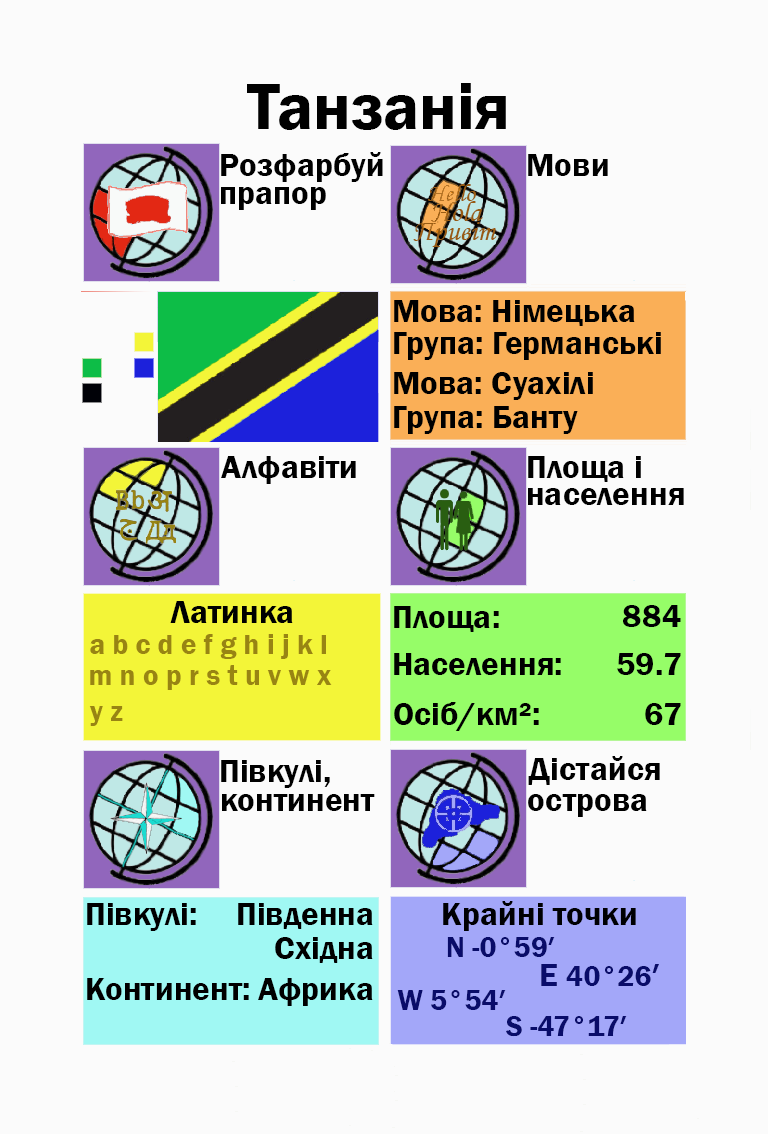
<style>
.page{position:relative;width:768px;height:1134px;background:#fbfbfb}
.page>*{position:absolute;margin:0}
.t1{font:66.7px "FranklinGothic-Demi";color:#000000}
.t2{font:33.3px "FranklinGothic-Demi";color:#000000}
.t3{font:33.3px "FranklinGothic-Demi";color:#000003}
.t4{font:29.2px "FranklinGothic-Demi";color:#988413}
.t5{font:29.2px "FranklinGothic-Demi";color:#090c69}
.t6{font:33.3px "FranklinGothic-Demi";color:#090c69}
</style>
<div class="page">
<p class="t1" style="left:247px;top:83px;width:259px;height:47px">Танзанія</p>
<p class="t2" style="left:221px;top:152px;width:162px;height:30px">Розфарбуй</p>
<p class="t2" style="left:528px;top:154px;width:80px;height:22px">Мови</p>
<p class="t2" style="left:221px;top:187px;width:105px;height:23px">прапор</p>
<p class="t2" style="left:394px;top:300px;width:241px;height:26px">Мова: Німецька</p>
<p class="t2" style="left:394px;top:332px;width:267px;height:28px">Група: Германські</p>
<p class="t2" style="left:394px;top:372px;width:199px;height:28px">Мова: Суахілі</p>
<p class="t2" style="left:394px;top:406px;width:184px;height:28px">Група: Банту</p>
<p class="t2" style="left:221px;top:456px;width:135px;height:28px">Алфавіти</p>
<p class="t2" style="left:528px;top:456px;width:113px;height:26px">Площа і</p>
<p class="t2" style="left:528px;top:488px;width:156px;height:17px">населення</p>
<p class="t2" style="left:170px;top:601px;width:123px;height:22px">Латинка</p>
<p class="t2" style="left:394px;top:606px;width:105px;height:26px">Площа:</p>
<p class="t3" style="left:623px;top:605px;width:58px;height:22px">884</p>
<p class="t4" style="left:90px;top:634px;width:236px;height:25px">a b c d e f g h i j k l</p>
<p class="t2" style="left:394px;top:653px;width:167px;height:22px">Населення:</p>
<p class="t2" style="left:617px;top:653px;width:64px;height:22px">59.7</p>
<p class="t4" style="left:90px;top:665px;width:242px;height:25px">m n o p r s t u v w x</p>
<p class="t2" style="left:394px;top:702px;width:145px;height:29px">Осіб/км²:</p>
<p class="t4" style="left:89px;top:706px;width:34px;height:20px">y z</p>
<p class="t2" style="left:645px;top:703px;width:36px;height:22px">67</p>
<p class="t2" style="left:221px;top:760px;width:109px;height:28px">Півкулі,</p>
<p class="t2" style="left:528px;top:756px;width:132px;height:29px">Дістайся</p>
<p class="t2" style="left:222px;top:794px;width:153px;height:17px">континент</p>
<p class="t2" style="left:528px;top:794px;width:119px;height:23px">острова</p>
<p class="t2" style="left:87px;top:903px;width:109px;height:28px">Півкулі:</p>
<p class="t2" style="left:238px;top:903px;width:135px;height:26px">Південна</p>
<p class="t3" style="left:443px;top:901px;width:193px;height:30px">Крайні точки</p>
<p class="t2" style="left:275px;top:937px;width:98px;height:26px">Східна</p>
<p class="t5" style="left:447px;top:937px;width:108px;height:20px">N -0°59′</p>
<p class="t5" style="left:541px;top:964px;width:118px;height:22px"><span class="t6">E </span>40°26<span class="t6">′</span></p>
<p class="t2" style="left:87px;top:978px;width:162px;height:22px">Континент:</p>
<p class="t2" style="left:258px;top:978px;width:115px;height:28px">Африка</p>
<p class="t5" style="left:397px;top:990px;width:109px;height:20px">W 5°54′</p>
<p class="t5" style="left:506px;top:1016px;width:121px;height:21px">S -47°17′</p>
</div>
